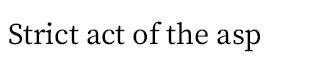
<style>
.page{position:relative;width:320px;height:64px;background:#ffffff}
.page>*{position:absolute;margin:0}
.t1{font:30px "SourceSerifRoman-Regular";color:#000000}
</style>
<div class="page">
<p class="t1" style="left:9px;top:21px;width:252px;height:31px">Strict act of the asp</p>
</div>
